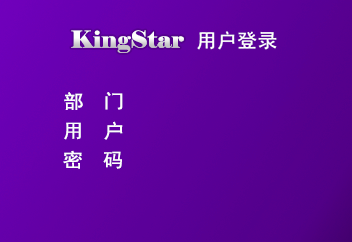
<style>
.page{position:relative;width:352px;height:242px}
.page>*{position:absolute;margin:0}
.t1{font:23.1px "Elephant-Regular";scale:1.05 1}
.t2{font:19.3px "SimHei";color:#fdfdfd;scale:1.05 1}
</style>
<div class="page">
<p class="t1" style="left:71px;top:30px;width:113px;height:23px">KingStar</p>
<p class="t2" style="left:197px;top:31px;width:80px;height:19px">用户登录</p>
<p class="t2" style="left:64px;top:92px;width:59px;height:18px">部  门</p>
<p class="t2" style="left:64px;top:121px;width:59px;height:19px">用  户</p>
<p class="t2" style="left:63px;top:150px;width:59px;height:19px">密  码</p>
</div>
